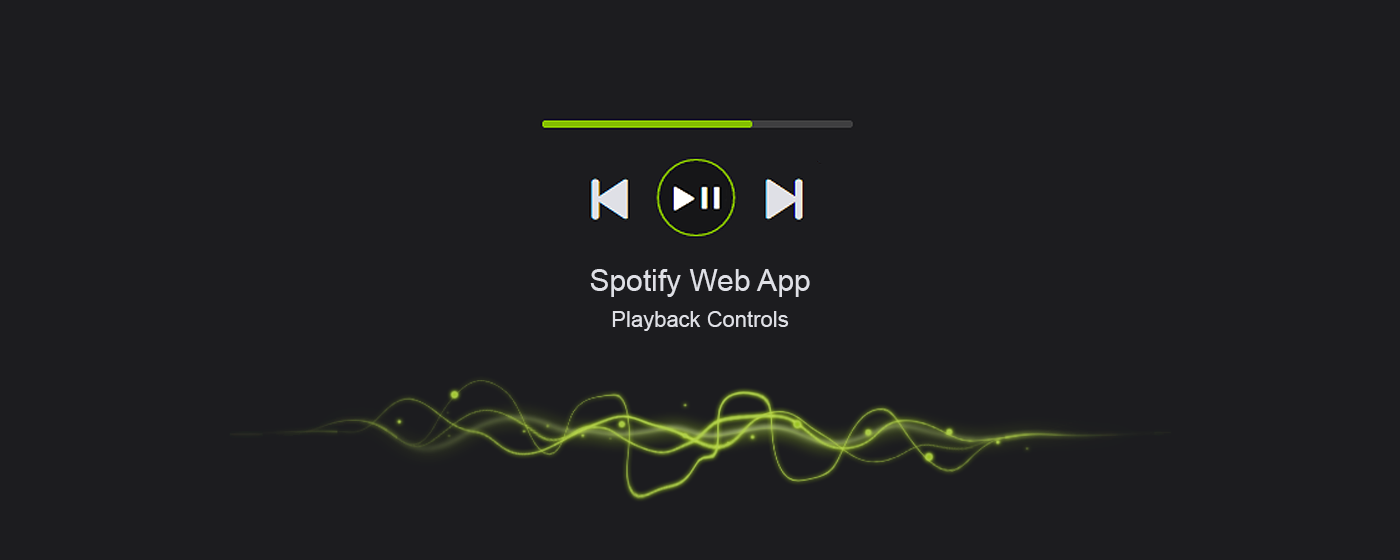
<style>
.page{position:relative;width:1400px;height:560px;background:#1c1c1f}
.page>*{position:absolute;margin:0}
.t1{font:22px "ArialMT";color:#dfe0e6}
.t2{font:30px "ArialMT";color:#dfe0e6}
</style>
<div class="page">
<p class="t1" style="left:590px;top:269px;width:220px;height:62px;text-align:center"><span class="t2">Spotify Web App<br> <br></span>Playback Controls</p>
</div>
